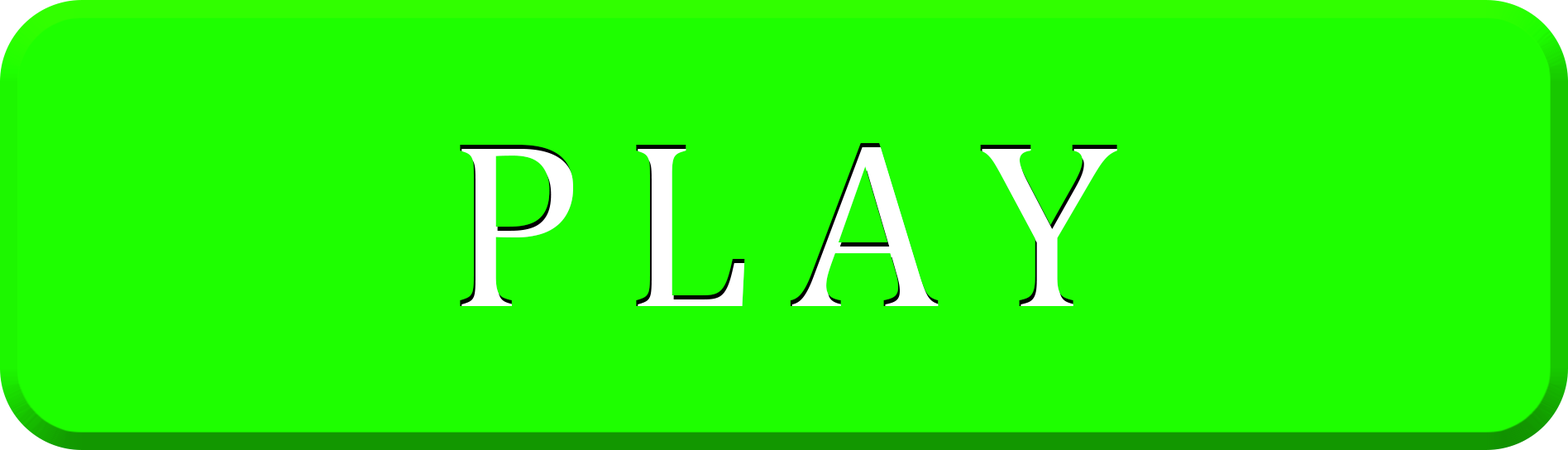
<style>
.page{position:relative;width:1568px;height:450px;background:#1eff00}
.page>*{position:absolute;margin:0}
.t1{font:241.2px "CambriaMath";letter-spacing:0.16em;color:#ffffff}
</style>
<div class="page">
<p class="t1" style="left:460px;top:143px;width:657px;height:163px">PLAY</p>
</div>
